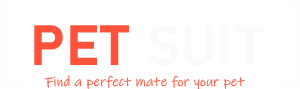
<style>
.page{position:relative;width:300px;height:89px;background:#ffffff}
.page>*{position:absolute;margin:0}
.t1{font:55.9px "Bahnschrift-Bold";letter-spacing:0.02em;color:#fafafa}
.t2{font:55.9px "Bahnschrift-Bold";letter-spacing:0.02em;color:#ff523b}
.t3{font:13.7px "InkFree";letter-spacing:0.02em}
</style>
<div class="page">
<p class="t1" style="left:34px;top:24px;width:230px;height:42px"><span class="t2">PET </span>SUIT</p>
<p class="t3" style="left:45px;top:75px;width:200px;height:14px">Find a perfect mate for your pet</p>
</div>
